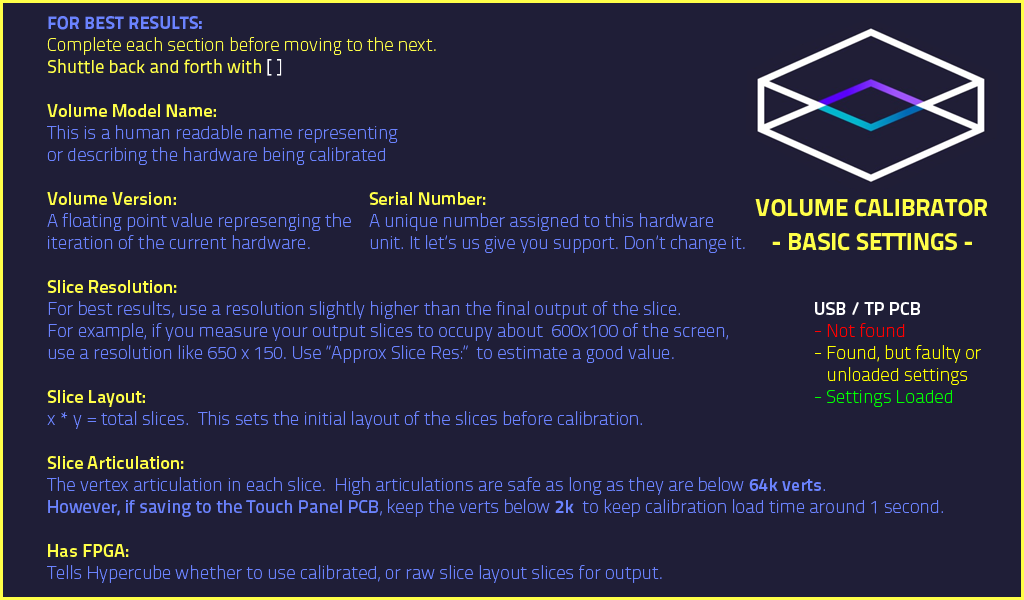
<style>
.page{position:relative;width:1024px;height:600px;background:#1f1e37}
.page>*{position:absolute;margin:0}
.t1{font:18.3px "TitilliumText22L-Thin";color:#6b83ff}
.t2{font:18.3px "TitilliumText22L-XBold";color:#6b83ff}
.t3{font:18.3px "TitilliumText22L-Thin";color:#ffff48}
.t4{font:18.3px "TitilliumText22L-Regular";color:#ffff48}
.t5{font:18.3px "TitilliumText22L-Regular";color:#ffffff}
.t6{font:18.3px "TitilliumText22L-Bold";color:#ffff48}
.t7{font:18.3px "TitilliumText22L-Bold";color:#6b83ff}
.t8{font:18.3px "TitilliumText22L-Medium";color:#6b83ff}
.t9{font:24.5px "TitilliumText22L-XBold";color:#ffff48}
.t10{font:18.3px "TitilliumText22L-Thin";color:#ffff00}
.t11{font:18.3px "TitilliumText22L-Bold";color:#ffffff}
.t12{font:18.3px "TitilliumText22L-Thin";color:#ff0000}
.t13{font:18.3px "TitilliumText22L-Thin";color:#00ff00}
</style>
<div class="page">
<p class="t1" style="left:47px;top:16px;width:896px;height:567px"><span class="t2">FOR BEST RESULTS:<br></span><span class="t3">Complete each section before moving to the next.<br></span><span class="t4">Shuttle back and forth with</span><span class="t5"> [ ]<br><br></span><span class="t6">Volume Model Name:<br></span>This is a human readable name representing<br>or describing the hardware being calibrated<br><br><span class="t6">Volume Version:<br></span>A floating point value represenging the<br>iteration of the current hardware.<br><br><span class="t6">Slice Resolution:<br></span>For best results, use a resolution slightly higher than the final output of the slice.<br>For example, if you measure your output slices to occupy about  600x100 of the screen, <br>use a resolution like 650 x 150. Use “Approx Slice Res:”  to estimate a good value.  <br><br><span class="t6">Slice Layout:<br></span>x * y = total slices.  This sets the initial layout of the slices before calibration.<br><br><span class="t6">Slice Articulation:<br></span>The vertex articulation in each slice.  High articulations are safe as long as they are below <span class="t7">64k verts</span>.  <br><span class="t8">However, if saving to the Touch Panel PCB</span>, keep the verts below <span class="t7">2k</span>  to keep calibration load time around 1 second.<br> <br><span class="t6">Has FPGA:<br></span>Tells Hypercube whether to use calibrated, or raw slice layout slices for output.</p>
<p class="t1" style="left:369px;top:192px;width:376px;height:61px"><span class="t6">Serial Number:<br></span>A unique number assigned to this hardware <br>unit. It let’s us give you support. Don’t change it.</p>
<p class="t9" style="left:755px;top:199px;width:232px;height:18px">VOLUME CALIBRATOR</p>
<p class="t9" style="left:772px;top:233px;width:200px;height:18px">- BASIC SETTINGS -</p>
<p class="t10" style="left:815px;top:302px;width:166px;height:105px"><span class="t11">USB / TP PCB<br></span><span class="t12">- Not found<br></span>- Found, but faulty or <br>   unloaded settings<br><span class="t13">- Settings Loaded</span></p>
</div>
